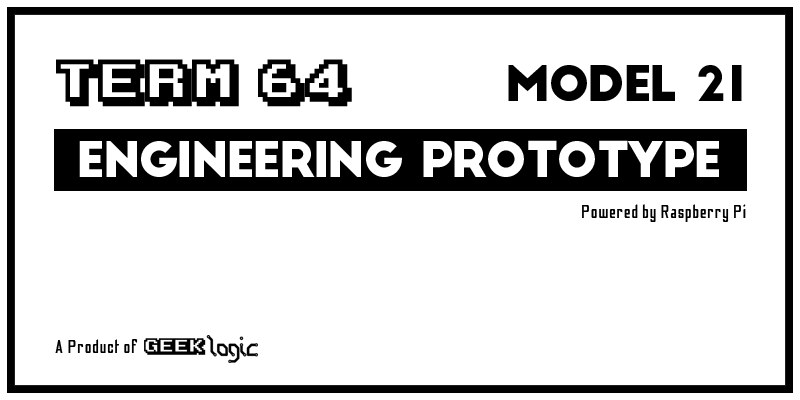
<style>
.page{position:relative;width:800px;height:400px;background:#ffffff}
.page>*{position:absolute;margin:0}
.t1{font:48px "KarmaticArcade";letter-spacing:0.1em;color:#000000}
.t2{font:48px "BigJohn";letter-spacing:-0.05em;color:#000000}
.t3{font:48px "BigJohn";letter-spacing:-0.05em;color:#ffffff}
.t4{font:18px "OdibeeSans-Regular";letter-spacing:0.05em;color:#000000}
</style>
<div class="page">
<p class="t1" style="left:56px;top:59px;width:296px;height:48px">TERM 64</p>
<p class="t2" style="left:508px;top:65px;width:234px;height:36px">MODEL 21</p>
<p class="t3" style="left:79px;top:140px;width:640px;height:37px">ENGINEERING PROTOTYPE</p>
<p class="t4" style="left:582px;top:204px;width:164px;height:18px">Powered by Raspberry Pi</p>
<p class="t4" style="left:55px;top:339px;width:83px;height:14px">A Product of</p>
</div>
